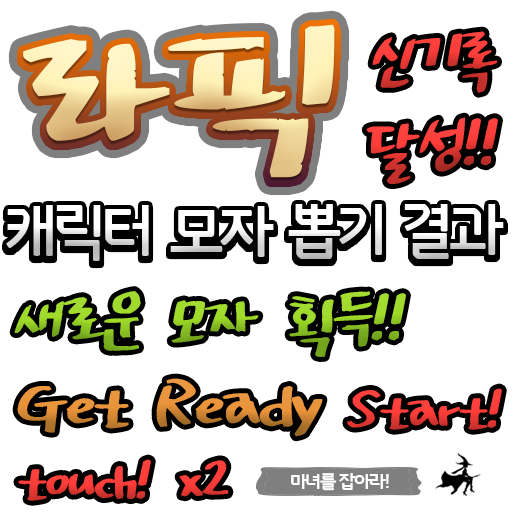
<style>
.page{position:relative;width:512px;height:512px;background:#ffffff}
.page>*{position:absolute;margin:0}
.t1{font:178.4px "drfont_daraehand";letter-spacing:-0.075em}
.t2{font:60px "drfont_daraehand";letter-spacing:-0.075em}
.t3{font:60px "GodoM";letter-spacing:-0.075em}
.t4{font:60px "drfont_daraehand";letter-spacing:-0.075em;color:#9dd829}
.t5{font:50px "drfont_daraehand";letter-spacing:-0.075em}
.t6{font:50px "drfont_daraehand";letter-spacing:-0.075em;color:#fd3c38}
.t7{font:18px "GodoM";letter-spacing:-0.075em;color:#ffffff}
</style>
<div class="page">
<p class="t1" style="left:23px;top:24px;width:312px;height:154px">라픽</p>
<p class="t2" style="left:372px;top:31px;width:125px;height:62px">신기록</p>
<p class="t2" style="left:366px;top:117px;width:132px;height:67px">달성!!</p>
<p class="t3" style="left:6px;top:205px;width:143px;height:56px">캐릭터</p>
<p class="t3" style="left:170px;top:206px;width:104px;height:51px">모자</p>
<p class="t3" style="left:288px;top:204px;width:94px;height:55px">뽑기</p>
<p class="t3" style="left:404px;top:204px;width:100px;height:55px">결과</p>
<p class="t2" style="left:14px;top:291px;width:127px;height:60px">새로운</p>
<p class="t2" style="left:289px;top:291px;width:117px;height:66px">획득!!</p>
<p class="t4" style="left:171px;top:300px;width:88px;height:43px">모자</p>
<p class="t2" style="left:17px;top:386px;width:112px;height:47px">Get</p>
<p class="t5" style="left:347px;top:388px;width:155px;height:42px">Start!</p>
<p class="t5" style="left:18px;top:459px;width:133px;height:42px">touch!</p>
<p class="t6" style="left:179px;top:460px;width:50px;height:37px">x2</p>
<p class="t7" style="left:291px;top:473px;width:98px;height:18px">마녀를 잡아라!</p>
</div>
